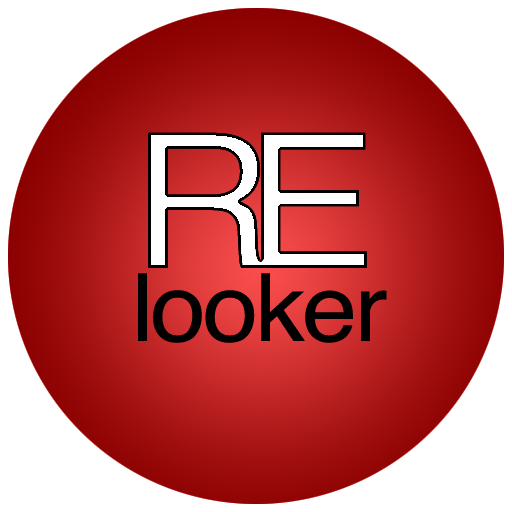
<style>
.page{position:relative;width:512px;height:512px;background:#ffffff}
.page>*{position:absolute;margin:0}
.t1{font:188px "Helvetica";letter-spacing:-0.155em;color:#ffffff;scale:1.06 1}
.t2{font:94px "Helvetica";letter-spacing:-0.155em;color:#000000;scale:1.06 1}
</style>
<div class="page">
<p class="t1" style="left:148px;top:132px;width:219px;height:136px">RE</p>
<p class="t2" style="left:138px;top:273px;width:249px;height:70px">l o o k e r</p>
</div>
